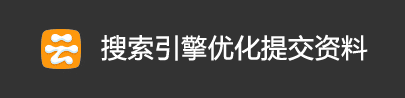
<style>
.page{position:relative;width:405px;height:98px;background:#333333}
.page>*{position:absolute;margin:0}
.t1{font:26px "MicrosoftYaHei";color:#ffffff;font-weight:bold}
</style>
<div class="page">
<p class="t1" style="left:101px;top:34px;width:267px;height:27px">搜索引擎优化提交资料</p>
</div>
